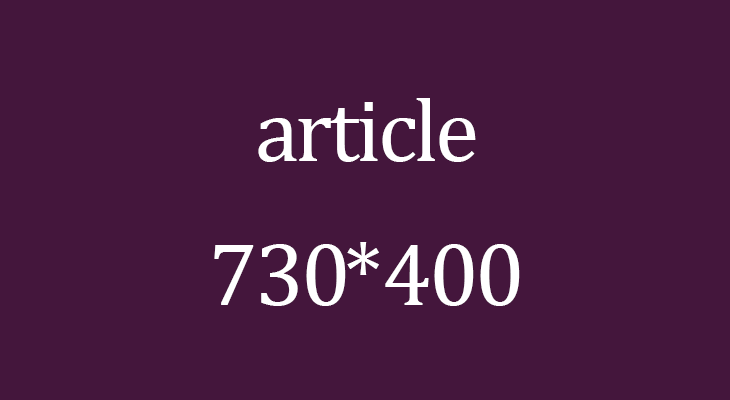
<style>
.page{position:relative;width:730px;height:400px;background:#44163c}
.page>*{position:absolute;margin:0}
.t1{font:90.4px/143.1px "CambriaMath";letter-spacing:-0.04em;color:#ffffff}
</style>
<div class="page">
<p class="t1" style="left:214px;top:98px;width:306px;height:208px;text-align:center">article<br>400*730</p>
</div>
